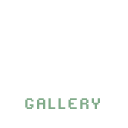
<style>
.page{position:relative;width:128px;height:128px;background:#ffffff}
.page>*{position:absolute;margin:0}
.t1{font:24px "BitsyButton-v2";letter-spacing:0.08em;color:#81ab8a;font-weight:bold}
</style>
<div class="page">
<p class="t1" style="left:25px;top:98px;width:75px;height:11px">GALLERY</p>
</div>
